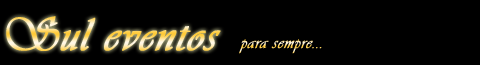
<style>
.page{position:relative;width:480px;height:65px;background:#000000}
.page>*{position:absolute;margin:0}
.t1{font:48px "Vivaldi";letter-spacing:0.02em;font-weight:bold}
.t2{font:18px "Vivaldi";letter-spacing:0.02em;font-weight:bold}
</style>
<div class="page">
<p class="t1" style="left:6px;top:16px;width:215px;height:35px">Sul eventos</p>
<p class="t2" style="left:239px;top:39px;width:83px;height:15px">para sempre...</p>
</div>
